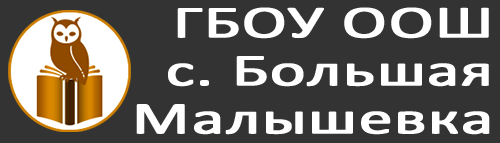
<style>
.page{position:relative;width:500px;height:143px;background:#333333}
.page>*{position:absolute;margin:0}
.t1{font:46px/48px "Calibri";color:#ffffff;font-weight:bold;scale:1.46 1}
</style>
<div class="page">
<p class="t1" style="left:136px;top:7px;width:354px;height:128px;text-align:right">ГБОУ ООШ<br>с. Большая<br>Малышевка</p>
</div>
